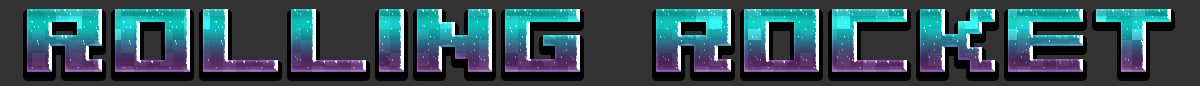
<style>
.page{position:relative;width:1200px;height:86px;background:#333333}
.page>*{position:absolute;margin:0}
.t1{font:100px "04b09";text-transform:uppercase}
</style>
<div class="page">
<p class="t1" style="left:27px;top:9px;width:1144px;height:63px">ROLLING ROCKET</p>
</div>
